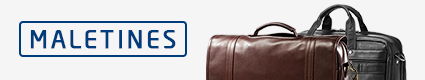
<style>
.page{position:relative;width:425px;height:80px;background:#f5f5f5}
.page>*{position:absolute;margin:0}
.t1{font:24px "NeoSansPro-Regular";letter-spacing:0.1em;color:#003b7c;font-weight:bold}
</style>
<div class="page">
<p class="t1" style="left:30px;top:30px;width:146px;height:19px">MALETINES</p>
</div>
